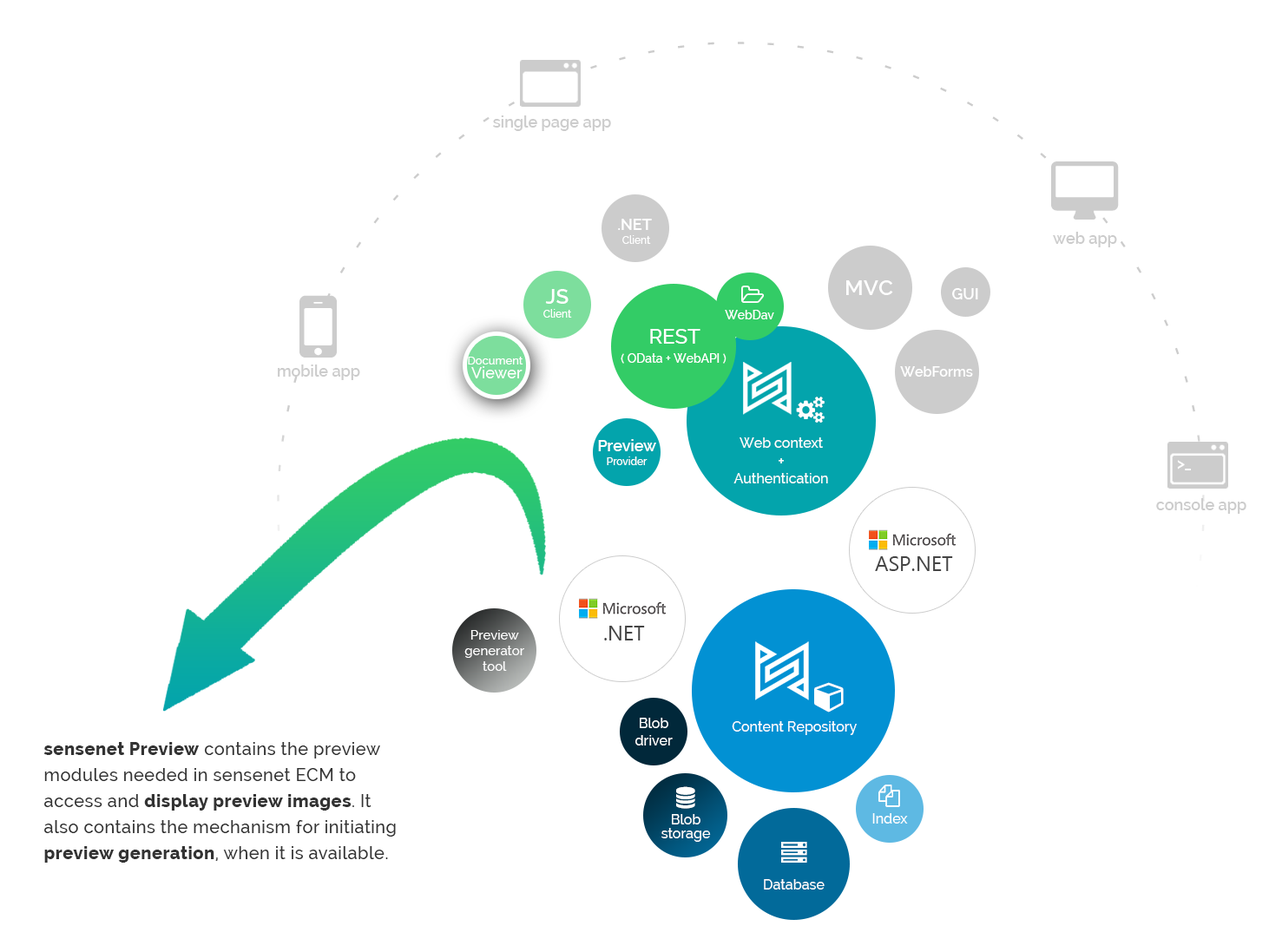
<style>
.page{position:relative;width:1269px;height:939px;background:#ffffff}
.page>*{position:absolute;margin:0}
.t1{font:15.6px "Raleway-SemiBold";color:#cccccc}
.t2{font:10.4px/13.9px "Raleway-Medium";color:#ffffff}
.t3{font:15.6px/13.9px "Raleway-SemiBold";color:#ffffff}
.t4{font:21.7px "Raleway-SemiBold";color:#ffffff}
.t5{font:20.8px/13.9px "Raleway-SemiBold";color:#ffffff}
.t6{font:15.6px "Raleway-SemiBold";color:#ffffff}
.t7{font:12.2px "Raleway-Medium";color:#ffffff}
.t8{font:20.8px "Raleway-Medium";color:#ffffff}
.t9{font:11.3px/13.9px "Raleway-Medium";color:#ffffff}
.t10{font:15.6px/13.9px "Raleway-Medium";color:#ffffff}
.t11{font:13.9px "Raleway-SemiBold";color:#ffffff}
.t12{font:13.9px "Raleway-Medium";color:#ffffff}
.t13{font:15.6px "Raleway-Medium";color:#ffffff}
.t14{font:20.8px "SegoeUI";color:#444444}
.t15{font:13px/15.6px "Raleway-Medium";color:#ffffff}
.t16{font:17.4px/26px "Raleway-Medium";letter-spacing:0.025em;color:#333333}
.t17{font:17.4px/26px "Raleway-ExtraBold";letter-spacing:0.025em;color:#333333}
.t18{font:13.9px/13.9px "Raleway-Medium";color:#ffffff}
</style>
<div class="page">
<p class="t1" style="left:493px;top:115px;width:118px;height:16px">single page app</p>
<p class="t2" style="left:618px;top:219px;width:34px;height:25px;text-align:center"><span class="t3">.NET <br></span>Client</p>
<p class="t1" style="left:1053px;top:232px;width:64px;height:15px">web app</p>
<p class="t4" style="left:847px;top:280px;width:46px;height:15px">MVC</p>
<p class="t2" style="left:544px;top:289px;width:28px;height:29px;text-align:center"><span class="t5">JS<br></span>Client</p>
<p class="t6" style="left:952px;top:288px;width:26px;height:12px">GUI</p>
<p class="t7" style="left:725px;top:310px;width:49px;height:10px">WebDav</p>
<p class="t8" style="left:650px;top:329px;width:51px;height:15px">REST</p>
<p class="t7" style="left:621px;top:353px;width:106px;height:11px">( OData + WebAPI )</p>
<p class="t1" style="left:278px;top:365px;width:82px;height:15px">mobile app</p>
<p class="t9" style="left:468px;top:357px;width:56px;height:22px;text-align:center">Document <br><span class="t10">Viewer</span></p>
<p class="t11" style="left:900px;top:366px;width:73px;height:11px">WebForms</p>
<p class="t12" style="left:734px;top:438px;width:94px;height:46px;text-align:center">Web context<br><span class="t13">+<br></span>Authentication</p>
<p class="t2" style="left:598px;top:439px;width:58px;height:26px;text-align:center"><span class="t3">Preview<br></span>Provider</p>
<p class="t6" style="left:1177px;top:460px;width:14px;height:11px">&gt;_</p>
<p class="t1" style="left:1156px;top:498px;width:91px;height:16px">console app</p>
<p class="t14" style="left:875px;top:557px;width:78px;height:14px">ASP.NET</p>
<p class="t14" style="left:604px;top:626px;width:41px;height:15px">.NET</p>
<p class="t15" style="left:464px;top:630px;width:60px;height:41px;text-align:center">Preview<br>generator<br>tool</p>
<p class="t12" style="left:636px;top:718px;width:37px;height:28px;text-align:center">Blob<br>driver</p>
<p class="t12" style="left:732px;top:721px;width:125px;height:14px">Content Repository</p>
<p class="t16" style="left:43px;top:742px;width:353px;height:121px"><span class="t17">sensenet Preview</span> contains the preview modules needed in sensenet ECM to access and <span class="t17">display preview images</span>. It also contains the mechanism for initiating <span class="t17">preview generation</span>, when it is available.</p>
<p class="t18" style="left:662px;top:814px;width:49px;height:28px;text-align:center">Blob storage</p>
<p class="t12" style="left:873px;top:814px;width:35px;height:10px">Index</p>
<p class="t12" style="left:764px;top:880px;width:61px;height:10px">Database</p>
</div>
